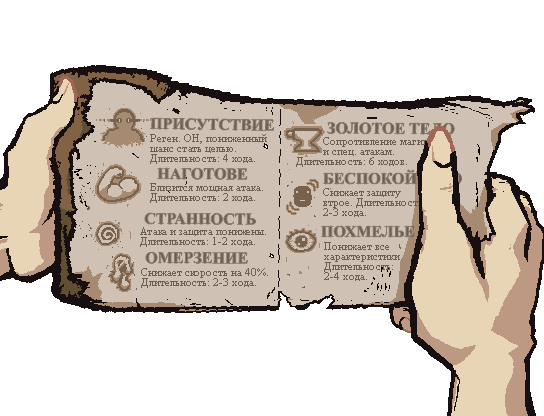
<style>
.page{position:relative;width:544px;height:416px;background:#ffffff}
.page>*{position:absolute;margin:0}
.t1{font:16px "TimesNewRomanPS-BoldMT";color:#6c6052}
.t2{font:11px/10px "TimesNewRomanPSMT";color:#6c6052}
</style>
<div class="page">
<p class="t1" style="left:150px;top:118px;width:124px;height:13px;rotate:1deg">ПРИСУТСТВИЕ</p>
<p class="t1" style="left:327px;top:122px;width:128px;height:13px">ЗОЛОТОЕ ТЕЛО</p>
<p class="t2" style="left:150px;top:134px;width:117px;height:30px">Реген. ОН, пониженный<br>шанс стать целью.<br>Длительность: 4 хода.</p>
<p class="t2" style="left:296px;top:137px;width:133px;height:30px">Сопротивление магии<br>         и спец. атакам.<br>Длительность: 6 ходов.</p>
<p class="t1" style="left:157px;top:168px;width:90px;height:12px">НАГОТОВЕ</p>
<p class="t1" style="left:323px;top:170px;width:139px;height:14px">БЕСПОКОЙСТВО</p>
<p class="t2" style="left:150px;top:183px;width:113px;height:20px">Близится мощная атака.<br>Длительность: 2 хода.</p>
<p class="t2" style="left:323px;top:188px;width:102px;height:29px">Снижает защиту<br>втрое. Длительность:<br>2-3 хода.</p>
<p class="t1" style="left:145px;top:213px;width:111px;height:12px">СТРАННОСТЬ</p>
<p class="t2" style="left:140px;top:227px;width:126px;height:20px">Атака и защита понижены.<br>Длительность: 1-2 хода.</p>
<p class="t1" style="left:321px;top:226px;width:94px;height:11px">ПОХМЕЛЬЕ</p>
<p class="t2" style="left:324px;top:242px;width:78px;height:39px">Понижает все<br>характеристики.<br>Длительность:<br>2-4 хода.</p>
<p class="t1" style="left:146px;top:252px;width:102px;height:12px">ОМЕРЗЕНИЕ</p>
<p class="t2" style="left:141px;top:268px;width:127px;height:20px">Снижает скорость на 40%.<br>Длительность: 2-3 хода.</p>
</div>
